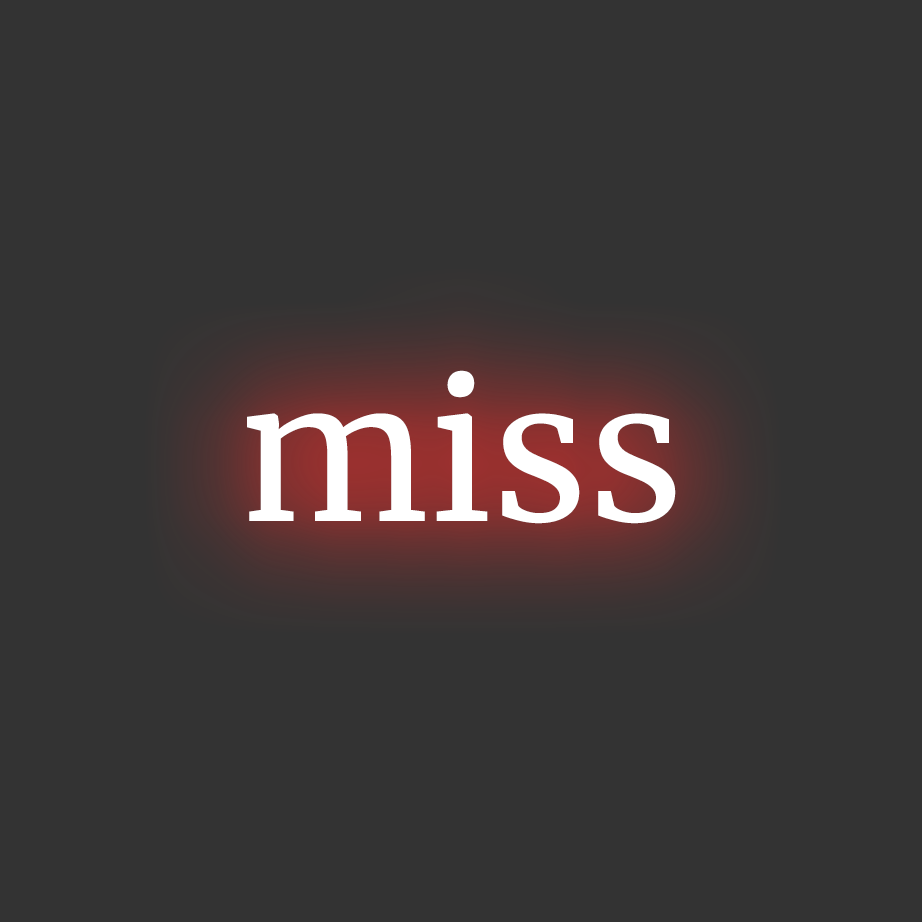
<style>
.page{position:relative;width:922px;height:922px;background:#333333}
.page>*{position:absolute;margin:0}
.t1{font:189.3px "Merriweather-Regular";color:#ffffff}
</style>
<div class="page">
<p class="t1" style="left:247px;top:370px;width:429px;height:154px">miss</p>
</div>
